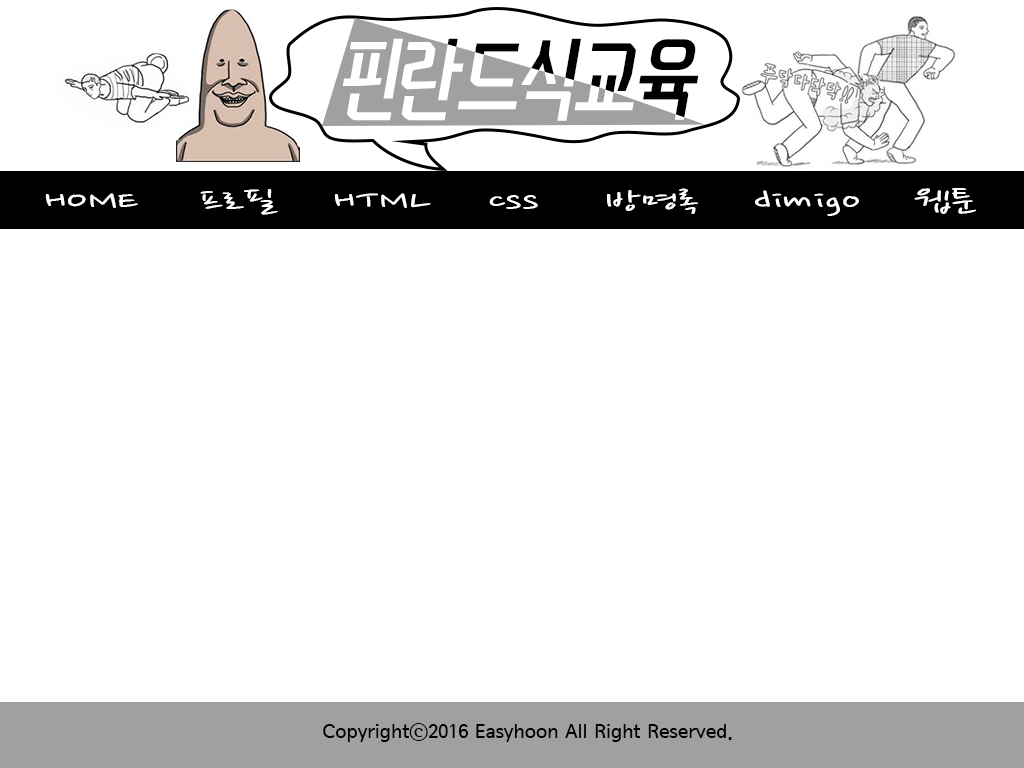
<style>
.page{position:relative;width:1024px;height:768px;background:#ffffff}
.page>*{position:absolute;margin:0}
.t1{font:30px "NanumPen";color:#ffffff;scale:1.62 1}
.t2{font:20px "SeoulNamsanB";color:#000000}
</style>
<div class="page">
<p class="t1" style="left:45px;top:193px;width:93px;height:15px">HOME</p>
<p class="t1" style="left:200px;top:189px;width:78px;height:26px">프로필</p>
<p class="t1" style="left:334px;top:193px;width:97px;height:15px">HTML</p>
<p class="t1" style="left:489px;top:195px;width:49px;height:14px">css</p>
<p class="t1" style="left:607px;top:188px;width:91px;height:26px">방명록</p>
<p class="t1" style="left:755px;top:190px;width:104px;height:26px">dimigo</p>
<p class="t1" style="left:914px;top:188px;width:63px;height:26px">웹툰</p>
<p class="t2" style="left:323px;top:723px;width:409px;height:19px">Copyrightⓒ2016 Easyhoon All Right Reserved.</p>
</div>
